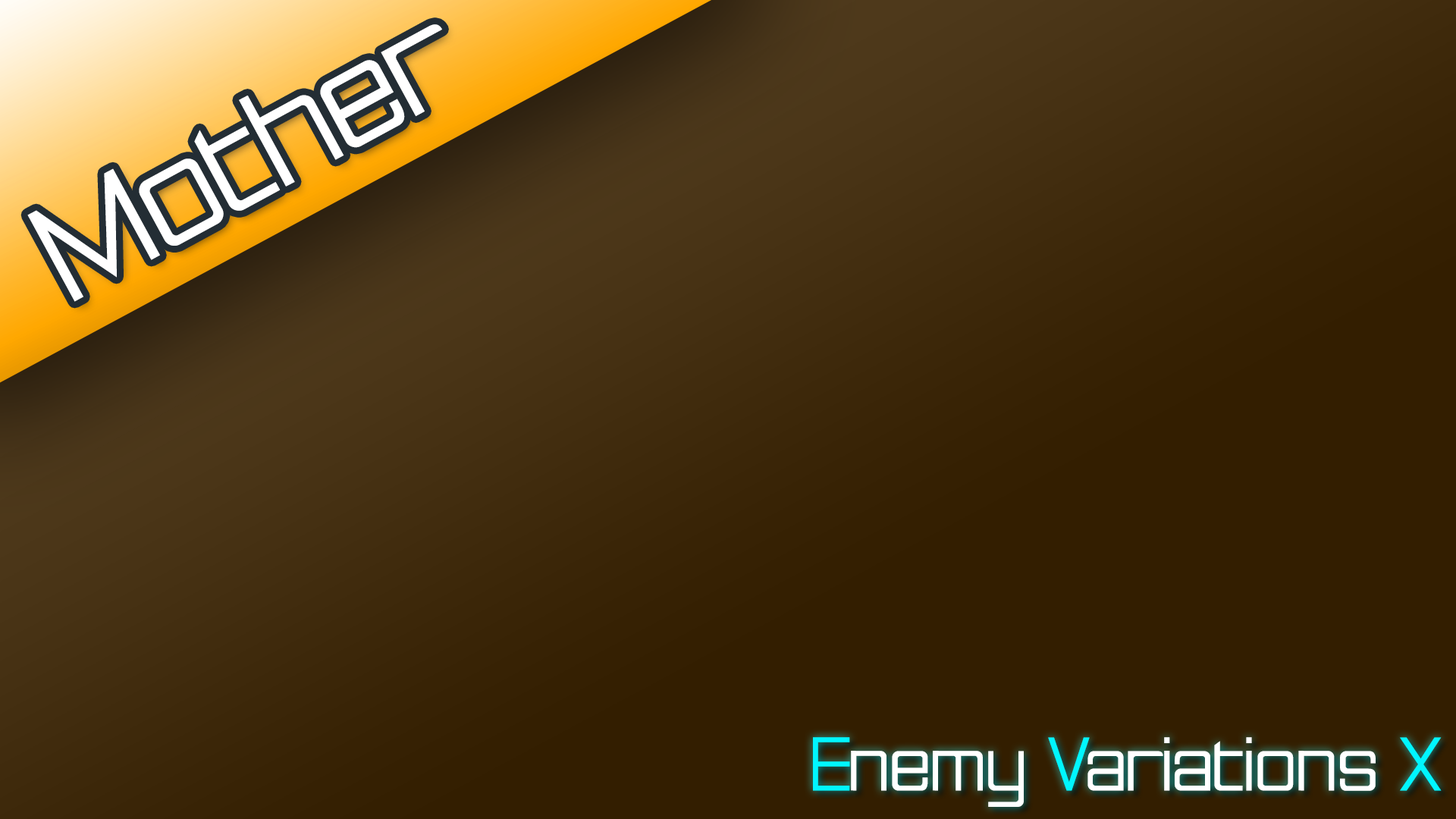
<style>
.page{position:relative;width:1456px;height:819px;background:#331e00}
.page>*{position:absolute;margin:0}
.t1{font:150.1px "RationalInteger";color:#ffffff}
.t2{font:81px "RationalInteger";color:#ffffff}
.t3{font:81px "RationalInteger";color:#00f6ff}
</style>
<div class="page">
<p class="t1" style="left:27px;top:24px;width:415px;height:278px;rotate:-29deg">Mother</p>
<p class="t2" style="left:813px;top:737px;width:629px;height:70px"><span class="t3">E</span>nemy <span class="t3">V</span>ariations <span class="t3">X</span></p>
</div>
